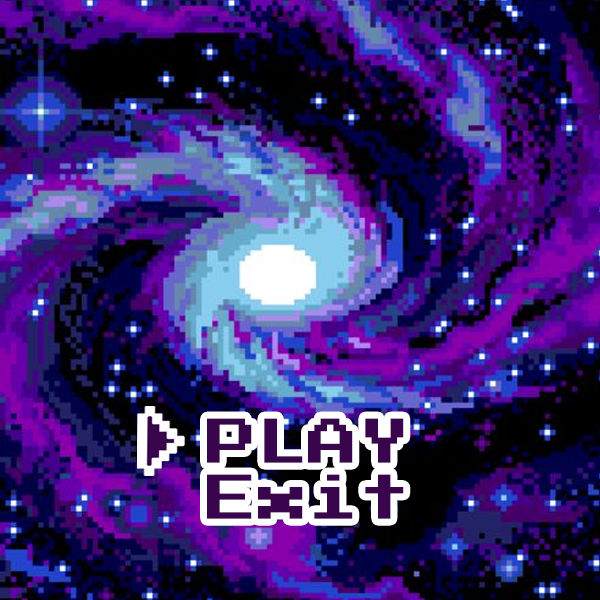
<style>
.page{position:relative;width:600px;height:600px}
.page>*{position:absolute;margin:0}
.t1{font:50.4px "PressStart2P";color:#39054d}
</style>
<div class="page">
<p class="t1" style="left:207px;top:418px;width:197px;height:45px">PLAY</p>
<p class="t1" style="left:207px;top:474px;width:197px;height:45px">Exit</p>
</div>
